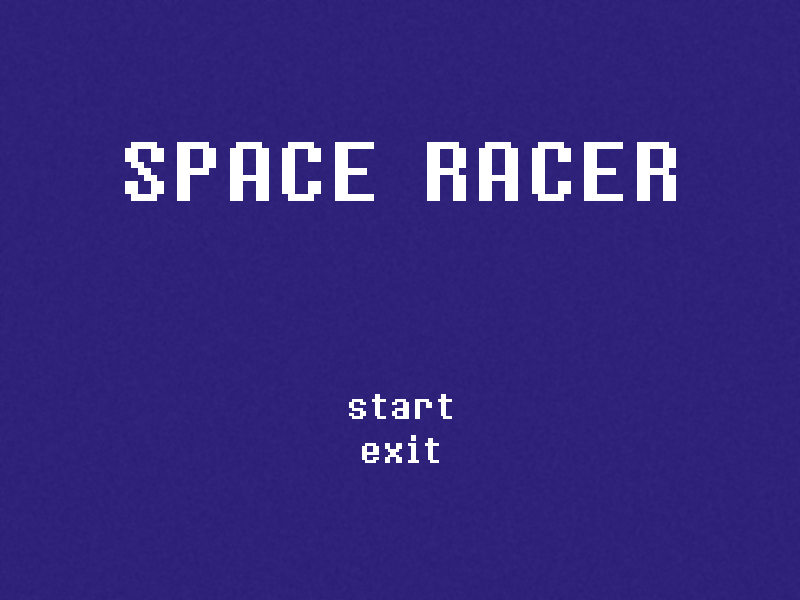
<style>
.page{position:relative;width:800px;height:600px;background:#2d2179}
.page>*{position:absolute;margin:0}
.t1{font:70px "8bitoperatorRegular";color:#ffffff}
.t2{font:30px "8bitoperatorRegular";color:#ffffff}
</style>
<div class="page">
<p class="t1" style="left:125px;top:142px;width:551px;height:59px">SPACE RACER</p>
<p class="t2" style="left:349px;top:394px;width:103px;height:25px">start</p>
<p class="t2" style="left:362px;top:435px;width:77px;height:28px">exit</p>
</div>
